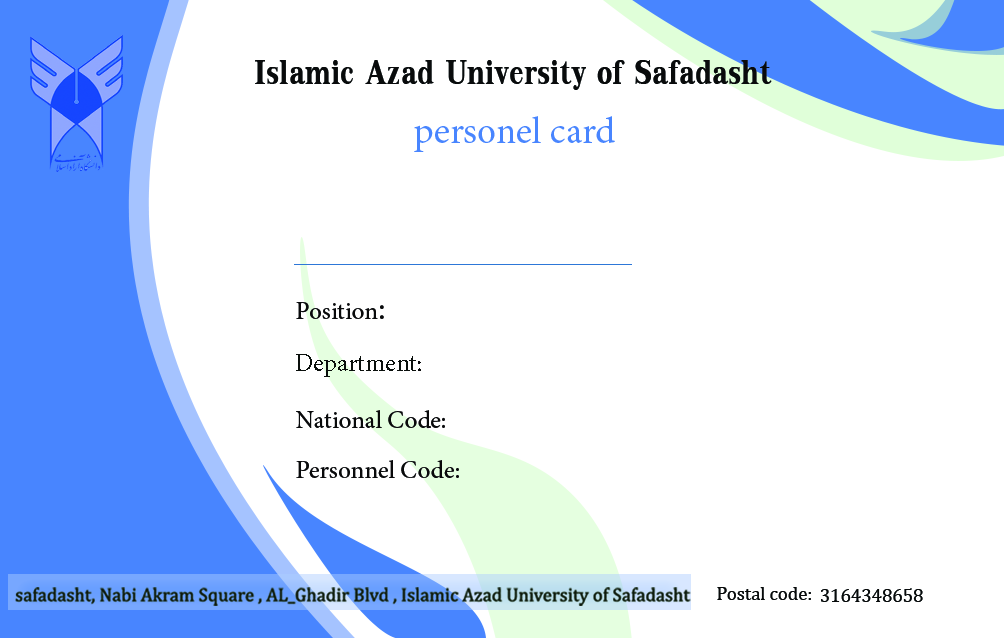
<style>
.page{position:relative;width:1004px;height:638px;background:#ffffff}
.page>*{position:absolute;margin:0}
.t1{font:50px "KodchiangUPCBold";color:#090b0c}
.t2{font:37.5px "MinionPro-Regular";color:#4885ff}
.t3{font:25px "MinionPro-Regular";color:#090a0b}
.t4{font:33.3px "MinionPro-Regular";color:#090a0b}
.t5{font:25px "MinionPro-Regular";color:#0a0f0c}
.t6{font:25px "MinionPro-Medium";color:#090a0b}
.t7{font:18.7px "Cambria";color:#080a0b}
.t8{font:18.8px "Cambria";color:#070a0a}
</style>
<div class="page">
<p class="t1" style="left:255px;top:60px;width:517px;height:30px">Islamic Azad University of Safadasht</p>
<p class="t2" style="left:414px;top:116px;width:201px;height:36px">personel card</p>
<p class="t3" style="left:296px;top:302px;width:88px;height:17px"><span class="t4">  :</span>Position</p>
<p class="t5" style="left:296px;top:354px;width:125px;height:23px"><span class="t3">:</span>Department</p>
<p class="t3" style="left:296px;top:410px;width:149px;height:19px">:National Code</p>
<p class="t6" style="left:296px;top:460px;width:163px;height:18px">:Personnel Code</p>
<p class="t7" style="left:717px;top:587px;width:94px;height:13px">:Postal code</p>
<p class="t8" style="left:821px;top:588px;width:102px;height:14px">3164348658</p>
</div>
